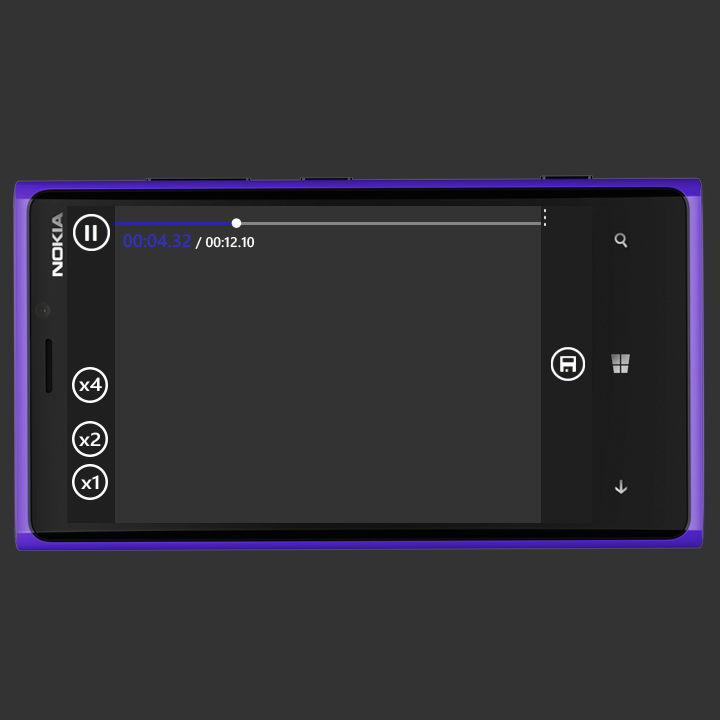
<style>
.page{position:relative;width:720px;height:720px;background:#333333}
.page>*{position:absolute;margin:0}
.t1{font:14px "SegoeWP-Semibold";color:#ffffff}
.t2{font:18px "SegoeWP-Semibold";color:#3030c1}
.t3{font:18.7px "SegoeWP-Semibold";color:#ffffff;scale:1.15 1}
</style>
<div class="page">
<p class="t1" style="left:123px;top:234px;width:132px;height:15px"><span class="t2">00:04.32</span> / 00:12.10</p>
<p class="t3" style="left:79px;top:377px;width:23px;height:14px">x4</p>
<p class="t3" style="left:79px;top:432px;width:22px;height:14px">x2</p>
<p class="t3" style="left:81px;top:475px;width:18px;height:14px">x1</p>
</div>
